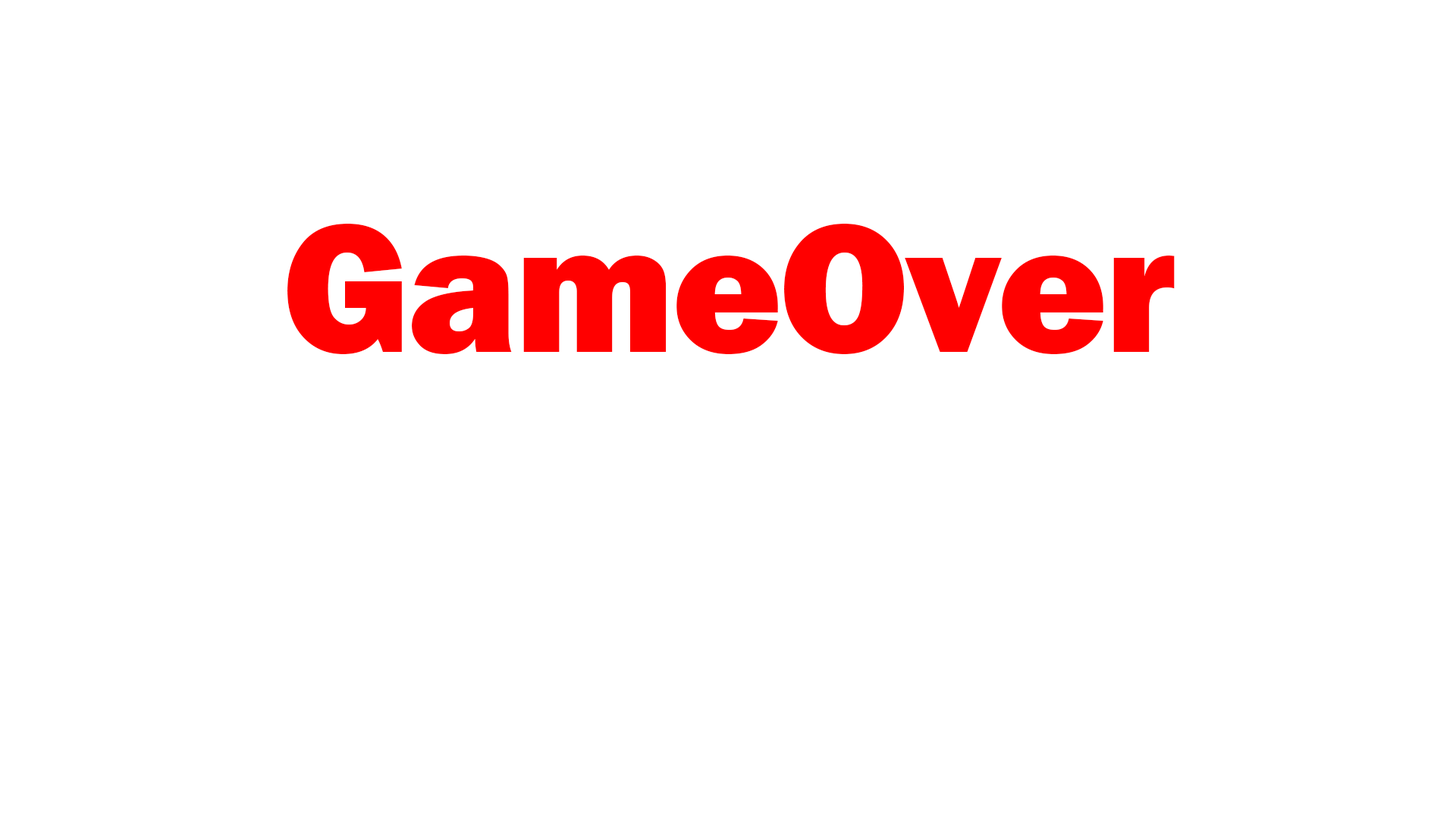
<style>
.page{position:relative;width:1456px;height:819px;background:#ffffff}
.page>*{position:absolute;margin:0}
.t1{font:188.6px "FranklinGothic-Heavy";letter-spacing:-0.02em;color:#ff0000}
</style>
<div class="page">
<p class="t1" style="left:287px;top:224px;width:888px;height:130px">GameOver</p>
</div>
